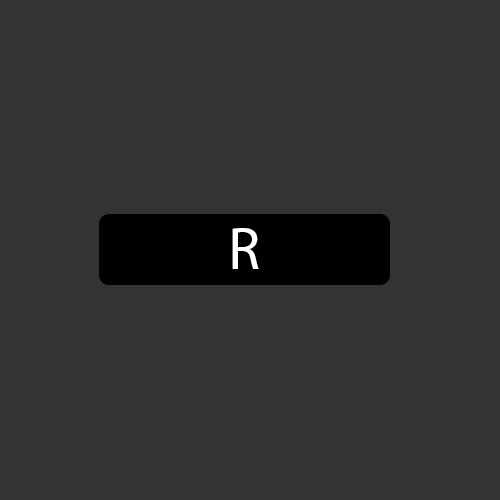
<style>
.page{position:relative;width:500px;height:500px;background:#333333}
.page>*{position:absolute;margin:0}
.t1{font:60px "MyriadPro-Regular";color:#ffffff}
</style>
<div class="page">
<p class="t1" style="left:232px;top:228px;width:27px;height:41px">R</p>
</div>
